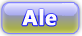
<style>
.page{position:relative;width:82px;height:36px}
.page>*{position:absolute;margin:0}
.t1{font:21.4px "SegoeUI-Bold";color:#fdfafa;font-weight:bold}
</style>
<div class="page">
<p class="t1" style="left:22px;top:9px;width:35px;height:17px">Ale</p>
</div>
